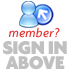
<style>
.page{position:relative;width:70px;height:70px;background:#ffffff}
.page>*{position:absolute;margin:0}
.t1{font:13px "Agenda-MediumItalic";letter-spacing:0.025em;color:#e72d2d}
.t2{font:20px/14.6px "Agenda-Black";letter-spacing:-0.035em;color:#c0c0c0}
</style>
<div class="page">
<p class="t1" style="left:8px;top:27px;width:52px;height:11px">member?</p>
<p class="t2" style="left:3px;top:41px;width:64px;height:29px;text-align:center">SIGN IN<br>ABOVE</p>
</div>
